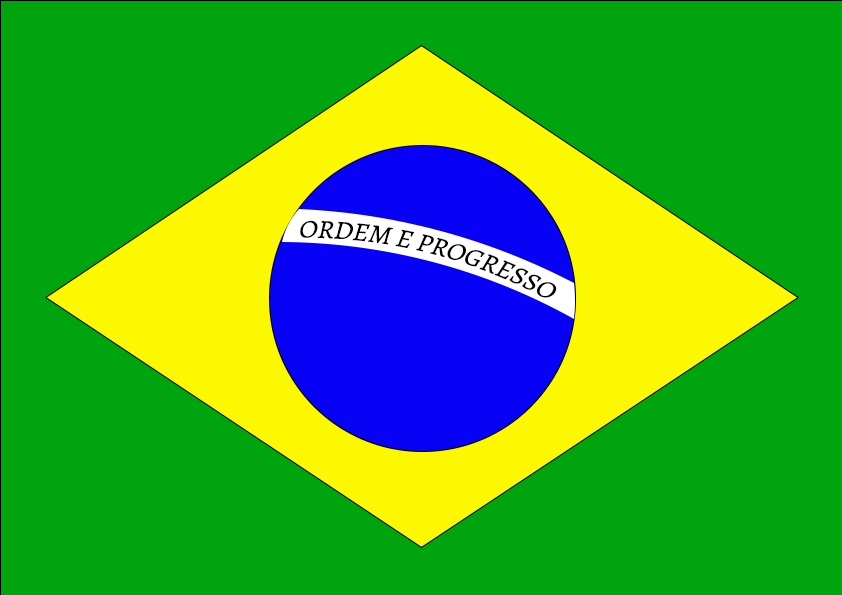
<style>
.page{position:relative;width:842px;height:595px;background:#00a40f}
.page>*{position:absolute;margin:0}
.t1{font:25.8px "Alegreya-Regular";color:#000000;font-style:italic}
</style>
<div class="page">
<p class="t1" style="left:300px;top:220px;width:257px;height:78px;rotate:14deg">ORDEM E PROGRESSO</p>
</div>
